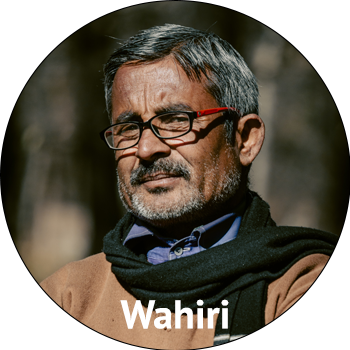
<style>
.page{position:relative;width:350px;height:350px;background:#ffffff}
.page>*{position:absolute;margin:0}
.t1{font:40px "PTSans-Bold";color:#ffffff}
</style>
<div class="page">
<p class="t1" style="left:120px;top:299px;width:109px;height:30px">Wahiri</p>
</div>
